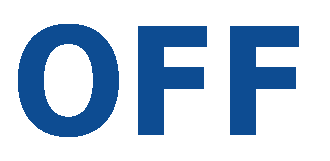
<style>
.page{position:relative;width:330px;height:161px;background:#ffffff}
.page>*{position:absolute;margin:0}
.t1{font:150px "DejaVuSansCondensed-Bold";color:#0d4c92}
</style>
<div class="page">
<p class="t1" style="left:18px;top:24px;width:281px;height:113px">OFF</p>
</div>
